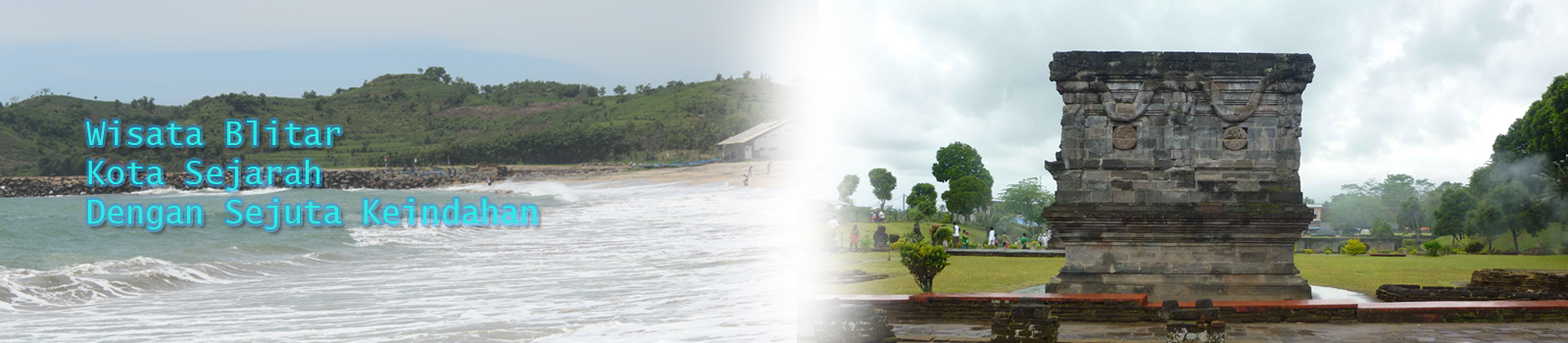
<style>
.page{position:relative;width:1568px;height:343px}
.page>*{position:absolute;margin:0}
.t1{font:32.7px "LucidaSans-Typewriter";color:#28ede6}
</style>
<div class="page">
<p class="t1" style="left:86px;top:121px;width:451px;height:108px">Wisata Blitar<br>Kota Sejarah<br>Dengan Sejuta Keindahan</p>
</div>
